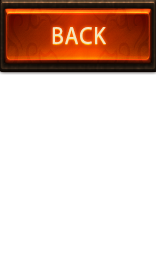
<style>
.page{position:relative;width:156px;height:271px;background:#ffffff}
.page>*{position:absolute;margin:0}
.t1{font:25px "MyriadPro-Regular";letter-spacing:0.05em;color:#f4e5bf;text-transform:uppercase;scale:0.91 1}
</style>
<div class="page">
<p class="t1" style="left:52px;top:27px;width:54px;height:17px">BACK</p>
</div>
